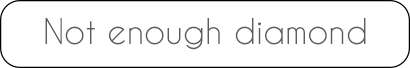
<style>
.page{position:relative;width:410px;height:68px;background:#ffffff}
.page>*{position:absolute;margin:0}
.t1{font:33.3px "CaviarDreams";color:#5f5b5b}
</style>
<div class="page">
<p class="t1" style="left:45px;top:18px;width:321px;height:32px">Not enough diamond</p>
</div>
